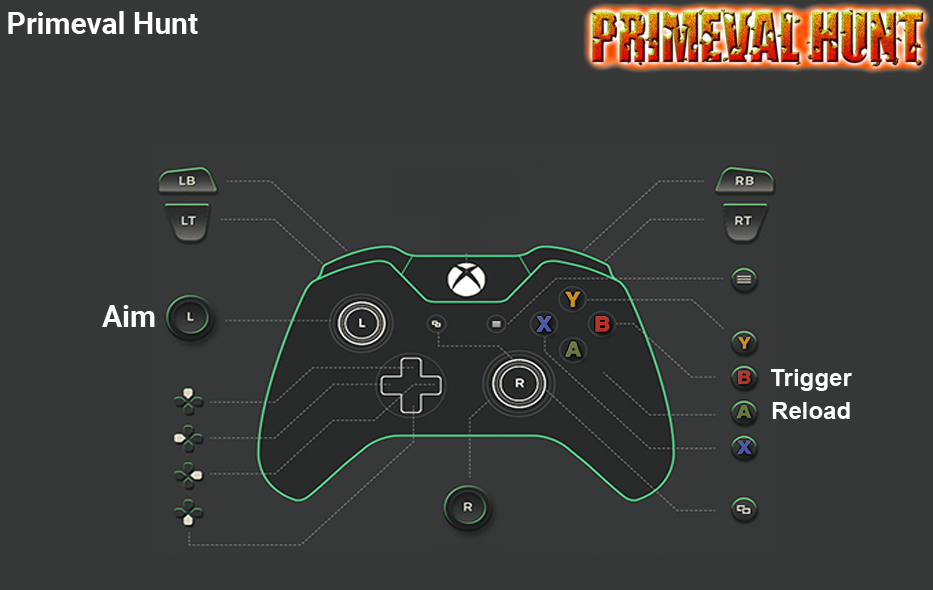
<style>
.page{position:relative;width:933px;height:590px;background:#363838}
.page>*{position:absolute;margin:0}
.t1{font:30px "Roboto-Bold";color:#ffffff}
.t2{font:30px "Roboto-Bold";color:#fefefe}
.t3{font:24px "Arial-BoldMT";color:#fefefe}
</style>
<div class="page">
<p class="t1" style="left:8px;top:11px;width:190px;height:23px">Primeval Hunt</p>
<p class="t2" style="left:102px;top:305px;width:53px;height:22px">Aim</p>
<p class="t3" style="left:771px;top:369px;width:81px;height:22px">Trigger</p>
<p class="t3" style="left:772px;top:402px;width:78px;height:17px">Reload</p>
</div>
